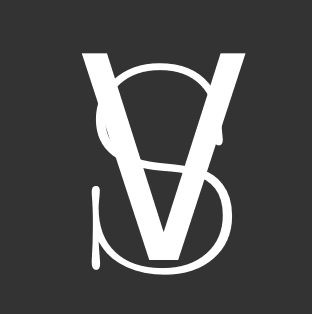
<style>
.page{position:relative;width:312px;height:314px;background:#333333}
.page>*{position:absolute;margin:0}
.t1{font:300px "AndaleMono";letter-spacing:0.1em;color:#ffffff}
.t2{font:300px "AmericanTypewriter-Light";letter-spacing:0.1em;color:#ffffff}
</style>
<div class="page">
<p class="t1" style="left:81px;top:53px;width:165px;height:222px">V<span class="t2">S</span></p>
</div>
